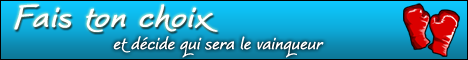
<style>
.page{position:relative;width:468px;height:60px}
.page>*{position:absolute;margin:0}
.t1{font:40px "WorstveldSlingExtra2Oblique";letter-spacing:0.025em;color:#ffffff;font-weight:bold;scale:1.15 1}
.t2{font:24px "WorstveldSlingExtra2Oblique";color:#ffffff;font-weight:bold}
</style>
<div class="page">
<p class="t1" style="left:14px;top:4px;width:204px;height:28px">Fais ton choix</p>
<p class="t2" style="left:113px;top:36px;width:211px;height:22px">et décide qui sera le vainqueur</p>
</div>
